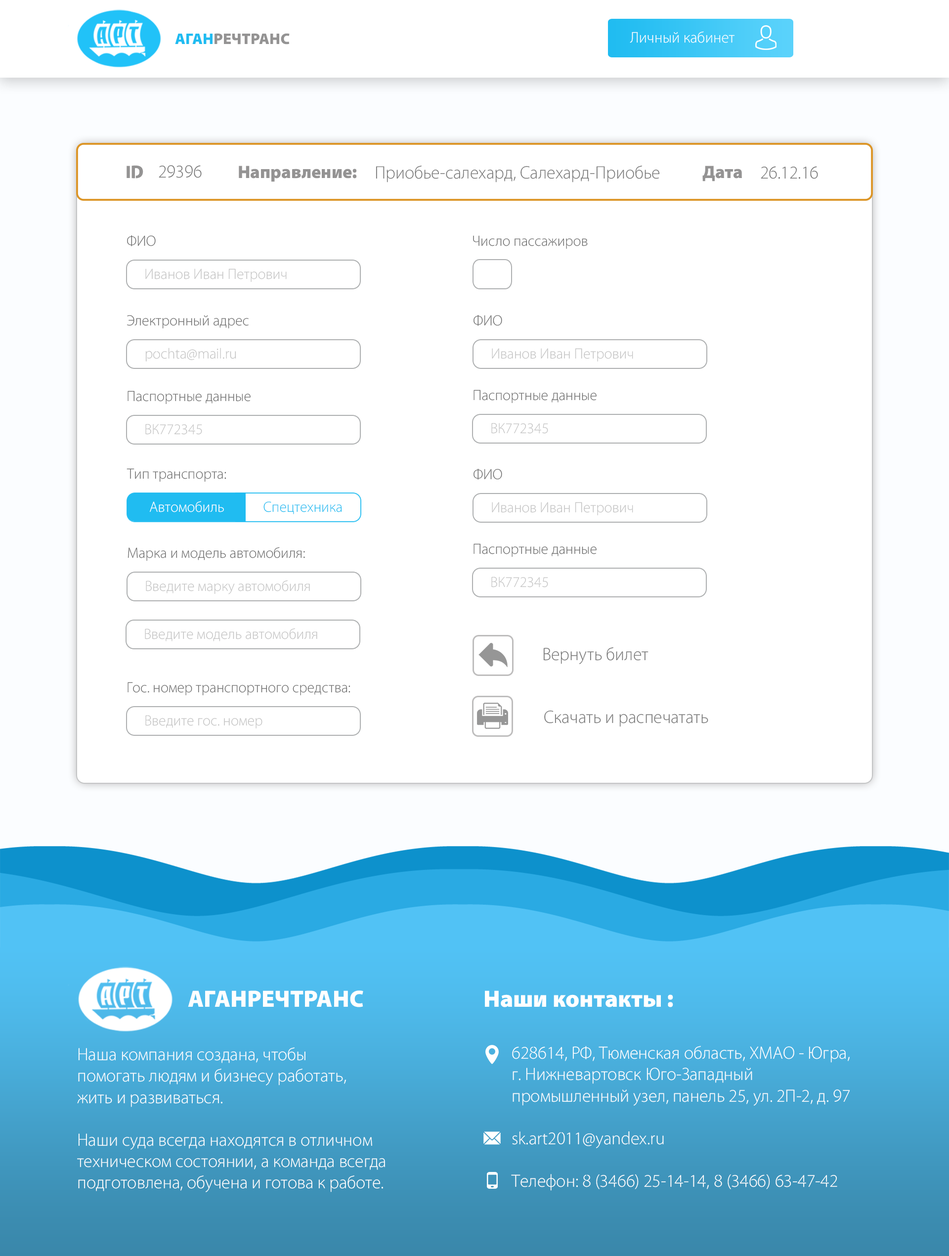
<style>
.page{position:relative;width:949px;height:1256px;background:#ffffff}
.page>*{position:absolute;margin:0}
.t1{font:15.5px "Cleanvertising-Black";color:#949393}
.t2{font:15.5px "Cleanvertising-Black";color:#20bcf1}
.t3{font:15.5px "Cleanvertising-Light";color:#ffffff}
.t4{font:18px "Cleanvertising-Black";color:#949393}
.t5{font:18px "Cleanvertising-Light";color:#787878}
.t6{font:14.8px "Cleanvertising-Light";color:#6c6c6c}
.t7{font:14.8px "Cleanvertising-Light";color:#c3c3c3}
.t8{font:23.7px "Cleanvertising-Black";color:#fefefe}
.t9{font:23.7px "Cleanvertising-Black";color:#ffffff}
.t10{font:17.8px "Cleanvertising-Light";color:#ffffff}
</style>
<div class="page">
<p class="t1" style="left:175px;top:33px;width:115px;height:12px"><span class="t2">АГАН</span>РЕЧТРАНС</p>
<p class="t3" style="left:630px;top:31px;width:105px;height:12px">Личный кабинет</p>
<p class="t4" style="left:127px;top:165px;width:16px;height:14px">ID</p>
<p class="t5" style="left:159px;top:165px;width:43px;height:13px">29396</p>
<p class="t4" style="left:239px;top:166px;width:118px;height:16px">Направление:</p>
<p class="t5" style="left:376px;top:165px;width:284px;height:17px">Приобье-салехард, Салехард-Приобье</p>
<p class="t4" style="left:703px;top:166px;width:39px;height:15px">Дата</p>
<p class="t5" style="left:761px;top:166px;width:57px;height:13px">26.12.16</p>
<p class="t6" style="left:127px;top:235px;width:29px;height:11px">ФИО</p>
<p class="t6" style="left:473px;top:235px;width:115px;height:14px">Число пассажиров</p>
<p class="t7" style="left:145px;top:269px;width:142px;height:13px">Иванов Иван Петрович</p>
<p class="t6" style="left:127px;top:315px;width:122px;height:14px">Электронный адрес</p>
<p class="t6" style="left:474px;top:314px;width:28px;height:12px">ФИО</p>
<p class="t7" style="left:145px;top:348px;width:91px;height:13px">pochta@mail.ru</p>
<p class="t7" style="left:492px;top:348px;width:141px;height:13px">Иванов Иван Петрович</p>
<p class="t6" style="left:474px;top:390px;width:123px;height:13px">Паспортные данные</p>
<p class="t6" style="left:128px;top:391px;width:123px;height:13px">Паспортные данные</p>
<p class="t7" style="left:145px;top:424px;width:57px;height:11px">ВК772345</p>
<p class="t7" style="left:492px;top:423px;width:56px;height:11px">ВК772345</p>
<p class="t6" style="left:127px;top:468px;width:99px;height:14px">Тип транспорта:</p>
<p class="t6" style="left:474px;top:468px;width:28px;height:12px">ФИО</p>
<p class="t7" style="left:492px;top:502px;width:141px;height:13px">Иванов Иван Петрович</p>
<p class="t6" style="left:474px;top:543px;width:123px;height:14px">Паспортные данные</p>
<p class="t6" style="left:128px;top:547px;width:177px;height:14px">Марка и модель автомобиля:</p>
<p class="t7" style="left:146px;top:580px;width:164px;height:14px">Введите марку автомобиля</p>
<p class="t7" style="left:492px;top:577px;width:56px;height:10px">ВК772345</p>
<p class="t7" style="left:145px;top:628px;width:172px;height:13px">Введите модель автомобиля</p>
<p class="t5" style="left:543px;top:647px;width:106px;height:17px">Вернуть билет</p>
<p class="t6" style="left:128px;top:682px;width:223px;height:14px">Гос. номер транспортного средства:</p>
<p class="t5" style="left:544px;top:710px;width:165px;height:17px">Скачать и распечатать</p>
<p class="t7" style="left:145px;top:715px;width:118px;height:13px">Введите гос. номер</p>
<p class="t8" style="left:188px;top:990px;width:175px;height:17px">АГАНРЕЧТРАНС</p>
<p class="t9" style="left:485px;top:990px;width:188px;height:17px">Наши контакты :</p>
<p class="t10" style="left:77px;top:1047px;width:308px;height:145px">Наша компания создана, чтобы<br>помогать людям и бизнесу работать,<br>жить и развиваться.<br><br>Наши суда всегда находятся в отличном<br>техническом состоянии, а команда всегда<br>подготовлена, обучена и готова к работе.</p>
<p class="t10" style="left:511px;top:1046px;width:340px;height:145px">628614, РФ, Тюменская область, ХМАО - Югра,<br>г. Нижневартовск Юго-Западный <br>промышленный узел, панель 25, ул. 2П-2, д. 97<br><br>sk.art2011@yandex.ru<br><br>Телефон: 8 (3466) 25-14-14, 8 (3466) 63-47-42</p>
</div>
